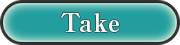
<style>
.page{position:relative;width:180px;height:45px}
.page>*{position:absolute;margin:0}
.t1{font:25px "RyuminPro-ExBold";color:#fff6f3}
</style>
<div class="page">
<p class="t1" style="left:61px;top:13px;width:58px;height:19px">Take</p>
</div>
